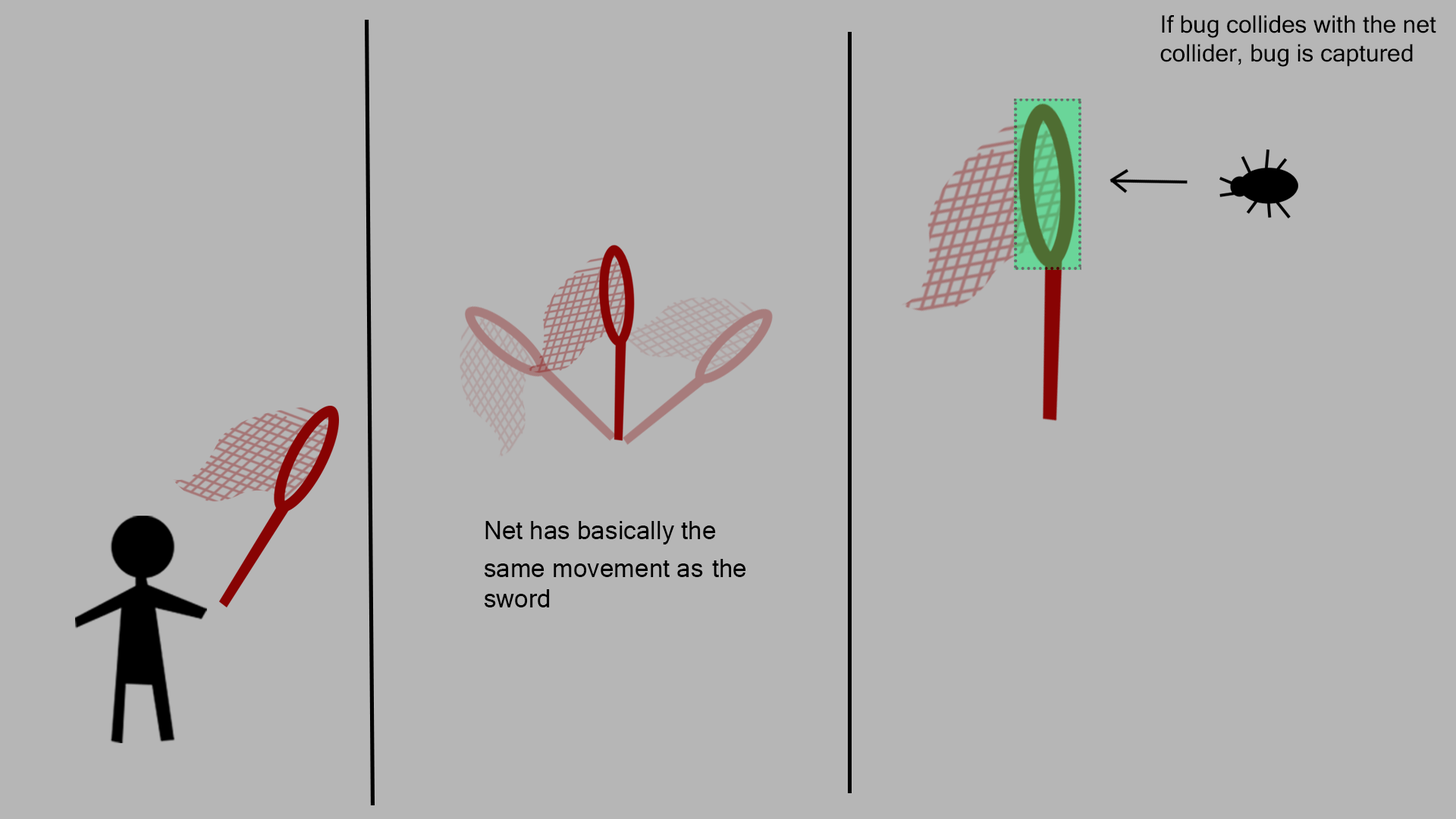
<style>
.page{position:relative;width:1456px;height:819px;background:#b6b6b6}
.page>*{position:absolute;margin:0}
.t1{font:24.1px "MicrosoftSansSerif";color:#000000}
.t2{font:25.3px "MicrosoftSansSerif";color:#000000}
</style>
<div class="page">
<p class="t1" style="left:1160px;top:15px;width:276px;height:52px">If bug collides with the net collider, bug is captured</p>
<p class="t2" style="left:485px;top:521px;width:261px;height:86px">Net has basically the same movement as the sword</p>
</div>
